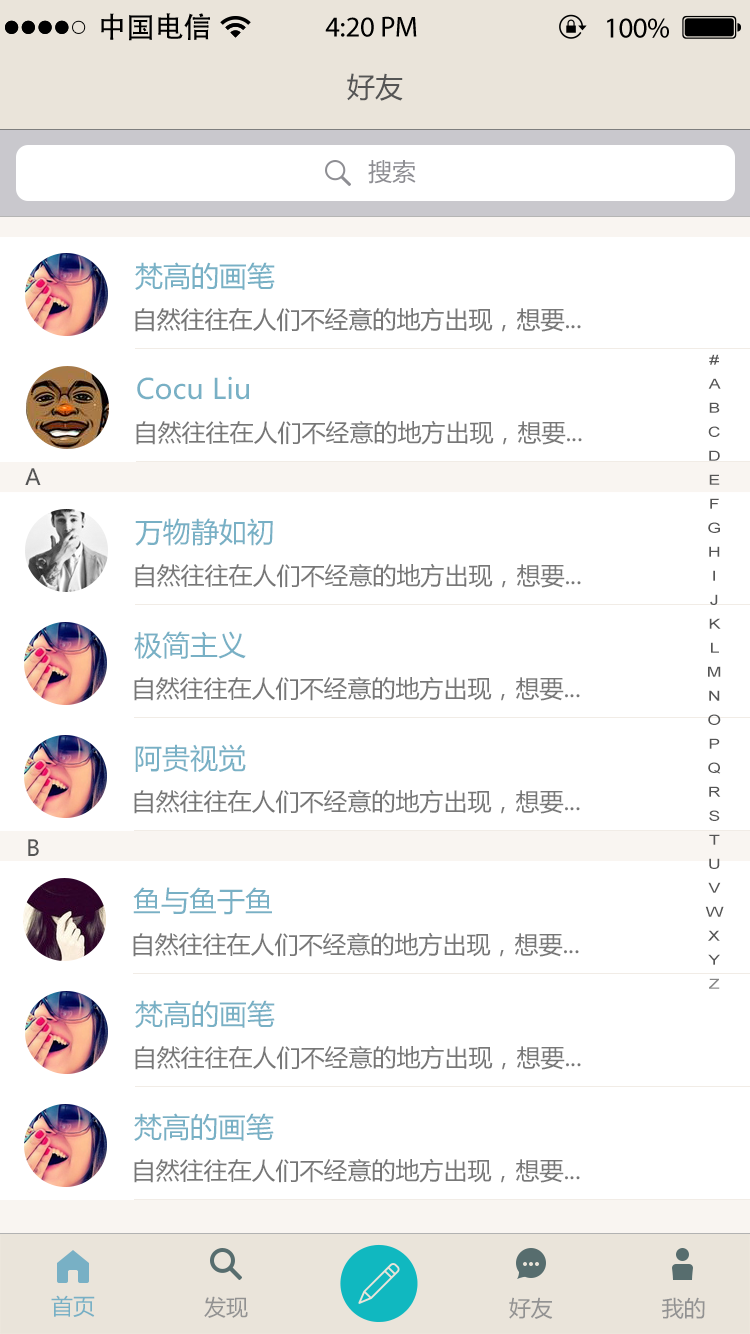
<style>
.page{position:relative;width:750px;height:1334px;background:#ffffff}
.page>*{position:absolute;margin:0}
.t1{font:28.8px "AdobeHeitiStd-Regular";color:#000000}
.t2{font:28.8px "MyriadPro-Regular";color:#000000}
.t3{font:28px "MicrosoftYaHei";color:#555555}
.t4{font:24px "MicrosoftYaHei";color:#8e8e93}
.t5{font:28px "MicrosoftYaHei";color:#78b0c5}
.t6{font:24px "MicrosoftYaHei";color:#777777}
.t7{font:14px/24px "ArialMT";color:#555555;scale:1.28 1}
.t8{font:14px/24px "ArialMT";color:#888888;scale:1.28 1}
.t9{font:22.2px "MicrosoftYaHei";color:#555555}
.t10{font:22px "MicrosoftYaHei";color:#78b0c5}
.t11{font:22px "MicrosoftYaHei";color:#929292}
.t12{font:30px "MicrosoftYaHei";color:#929292}
</style>
<div class="page">
<p class="t1" style="left:101px;top:13px;width:109px;height:28px">中国电信</p>
<p class="t2" style="left:325px;top:16px;width:92px;height:21px">4:20 PM</p>
<p class="t2" style="left:607px;top:18px;width:62px;height:20px">100%</p>
<p class="t3" style="left:347px;top:73px;width:56px;height:28px">好友</p>
<p class="t4" style="left:368px;top:160px;width:48px;height:24px">搜索</p>
<p class="t5" style="left:135px;top:262px;width:140px;height:28px">梵高的画笔</p>
<p class="t6" style="left:135px;top:307px;width:446px;height:25px">自然往往在人们不经意的地方出现，想要...</p>
<p class="t7" style="left:705px;top:354px;width:19px;height:635px;text-align:center">#<br>A<br>B<br>C<br>D<br>E<br>F<br>G<br>H<br>I<br>J<br>K<br>L<br>M<br>N<br>O<br>P<br>Q<br>R<br>S<br>T<br>U<br>V<br>W<br>X<br>Y<br><span class="t8">Z</span></p>
<p class="t5" style="left:137px;top:376px;width:112px;height:24px">Cocu Liu</p>
<p class="t6" style="left:136px;top:420px;width:446px;height:25px">自然往往在人们不经意的地方出现，想要...</p>
<p class="t9" style="left:25px;top:468px;width:16px;height:17px">A</p>
<p class="t5" style="left:135px;top:518px;width:138px;height:28px">万物静如初</p>
<p class="t6" style="left:135px;top:563px;width:446px;height:25px">自然往往在人们不经意的地方出现，想要...</p>
<p class="t5" style="left:134px;top:631px;width:112px;height:28px">极简主义</p>
<p class="t6" style="left:134px;top:676px;width:446px;height:25px">自然往往在人们不经意的地方出现，想要...</p>
<p class="t5" style="left:135px;top:744px;width:111px;height:28px">阿贵视觉</p>
<p class="t6" style="left:134px;top:789px;width:446px;height:25px">自然往往在人们不经意的地方出现，想要...</p>
<p class="t9" style="left:28px;top:839px;width:11px;height:17px">B</p>
<p class="t5" style="left:133px;top:887px;width:139px;height:28px">鱼与鱼于鱼</p>
<p class="t6" style="left:133px;top:932px;width:446px;height:25px">自然往往在人们不经意的地方出现，想要...</p>
<p class="t5" style="left:135px;top:1000px;width:140px;height:28px">梵高的画笔</p>
<p class="t6" style="left:135px;top:1045px;width:446px;height:25px">自然往往在人们不经意的地方出现，想要...</p>
<p class="t5" style="left:134px;top:1113px;width:140px;height:28px">梵高的画笔</p>
<p class="t6" style="left:134px;top:1158px;width:446px;height:25px">自然往往在人们不经意的地方出现，想要...</p>
<p class="t10" style="left:51px;top:1295px;width:44px;height:22px">首页</p>
<p class="t11" style="left:204px;top:1296px;width:44px;height:22px"><span class="t12"> </span>发现</p>
<p class="t11" style="left:509px;top:1297px;width:44px;height:22px"><span class="t12">   </span>好友</p>
<p class="t11" style="left:662px;top:1297px;width:43px;height:22px"><span class="t12">  </span>我的</p>
</div>
